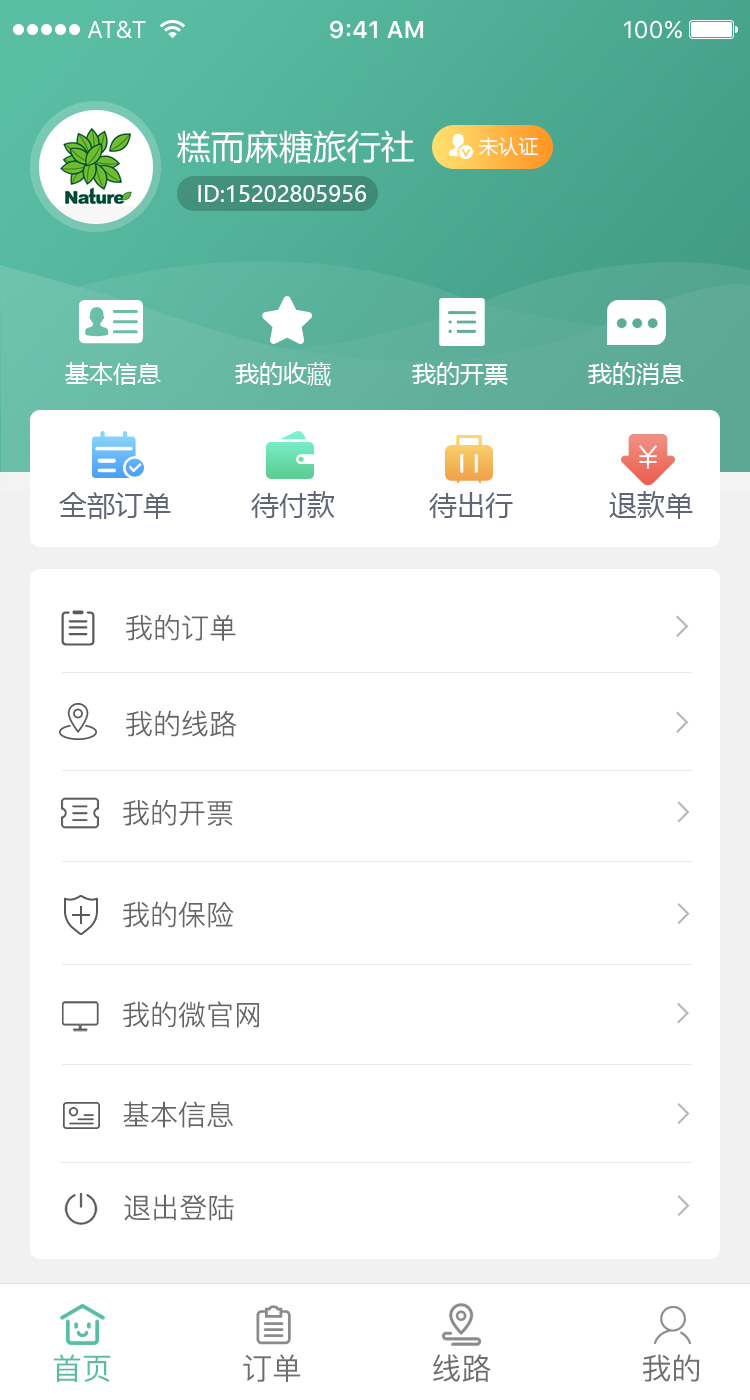
<style>
.page{position:relative;width:750px;height:1400px;background:#ffffff}
.page>*{position:absolute;margin:0}
.t1{font:34px "MicrosoftYaHei";color:#ffffff}
.t2{font:20px "MicrosoftYaHei";color:#ffffff}
.t3{font:22px "MicrosoftYaHei";color:#ffffff}
.t4{font:24px "MicrosoftYaHei";color:#ffffff}
.t5{font:28px "MicrosoftYaHei";color:#606676}
.t6{font:28px "PingFang-SC-Regular";color:#666666}
.t7{font:30px "PingFang-SC-Medium";color:#6f6f6f}
.t8{font:30px "PingFang-SC-Medium";color:#59bda4}
</style>
<div class="page">
<p class="t1" style="left:177px;top:130px;width:237px;height:34px">糕而麻糖旅行社</p>
<p class="t2" style="left:478px;top:137px;width:60px;height:19px">未认证</p>
<p class="t3" style="left:198px;top:185px;width:169px;height:17px">ID:15202805956</p>
<p class="t4" style="left:65px;top:362px;width:96px;height:23px">基本信息</p>
<p class="t4" style="left:235px;top:362px;width:96px;height:24px">我的收藏</p>
<p class="t4" style="left:412px;top:362px;width:96px;height:23px">我的开票</p>
<p class="t4" style="left:588px;top:362px;width:96px;height:23px">我的消息</p>
<p class="t5" style="left:59px;top:492px;width:112px;height:27px">全部订单</p>
<p class="t5" style="left:251px;top:491px;width:84px;height:27px">待付款</p>
<p class="t5" style="left:429px;top:492px;width:84px;height:26px">待出行</p>
<p class="t5" style="left:609px;top:491px;width:84px;height:28px">退款单</p>
<p class="t6" style="left:126px;top:614px;width:110px;height:27px">我的订单</p>
<p class="t6" style="left:126px;top:710px;width:111px;height:27px">我的线路</p>
<p class="t6" style="left:123px;top:800px;width:110px;height:26px">我的开票</p>
<p class="t6" style="left:123px;top:901px;width:111px;height:27px">我的保险</p>
<p class="t6" style="left:123px;top:1001px;width:136px;height:27px">我的微官网</p>
<p class="t6" style="left:123px;top:1101px;width:110px;height:27px">基本信息</p>
<p class="t6" style="left:124px;top:1194px;width:110px;height:27px">退出登陆</p>
<p class="t7" style="left:53px;top:1354px;width:647px;height:28px"><span class="t8">首页</span>             订单             线路               我的</p>
</div>
